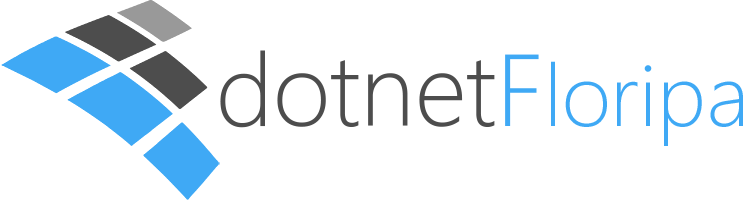
<style>
.page{position:relative;width:750px;height:200px;background:#ffffff}
.page>*{position:absolute;margin:0}
.t1{font:101.9px "SegoeUI-Light";color:#4d4d4d}
.t2{font:101.9px "SegoeUI-Light";color:#3fa9f5}
.t3{font:86.9px "SegoeUI-Light";color:#3fa9f5}
</style>
<div class="page">
<p class="t1" style="left:220px;top:50px;width:523px;height:96px">dotnet<span class="t2">F</span><span class="t3">loripa</span></p>
</div>
